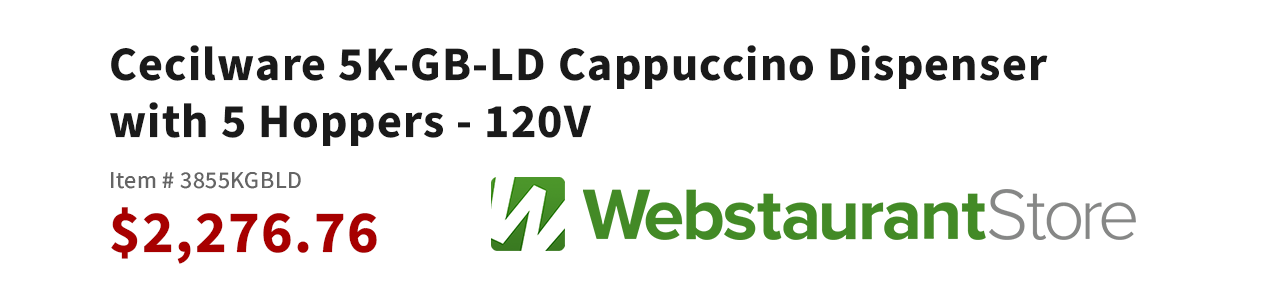
<style>
.page{position:relative;width:1262px;height:304px;background:#ffffff}
.page>*{position:absolute;margin:0}
.t1{font:48px "SourceSansRoman-Bold";letter-spacing:0.025em;color:#1a1a1a}
.t2{font:24px "SourceSansRoman-Regular";letter-spacing:0.025em;color:#656565}
.t3{font:60px "SourceSansRoman-Bold";letter-spacing:0.025em;color:#a70000}
</style>
<div class="page">
<p class="t1" style="left:110px;top:45px;width:938px;height:101px">Cecilware 5K-GB-LD Cappuccino Dispenser with 5 Hoppers - 120V</p>
<p class="t2" style="left:111px;top:172px;width:190px;height:17px">Item # 3855KGBLD</p>
<p class="t3" style="left:111px;top:207px;width:266px;height:57px">$2,276.76</p>
</div>
